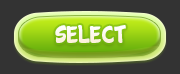
<style>
.page{position:relative;width:180px;height:74px;background:#333333}
.page>*{position:absolute;margin:0}
.t1{font:25px "Cartwheel";color:#ffffff}
</style>
<div class="page">
<p class="t1" style="left:55px;top:25px;width:71px;height:18px">select</p>
</div>
